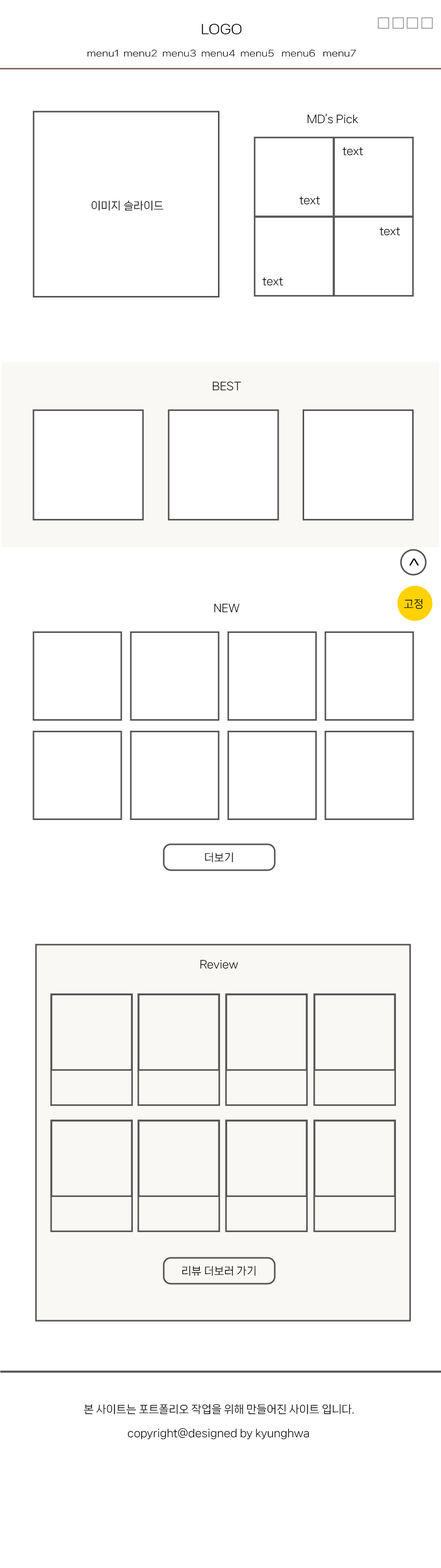
<style>
.page{position:relative;width:441px;height:1568px;background:#ffffff}
.page>*{position:absolute;margin:0}
.t1{font:8.4px "NanumSquareNeoTTF-bRg";color:#000000;scale:1.15 1}
.t2{font:10.6px "NanumSquareNeoTTF-bRg";color:#000000;scale:1.15 1}
.t3{font:12.7px "NanumSquareNeoTTF-bRg";color:#000000;scale:1.15 1}
.t4{font:10.6px "NanumSquareNeoTTF-bRg";color:#000000}
.t5{font:20.1px "NanumSquareNeoTTF-bRg";color:#000000}
</style>
<div class="page">
<p class="t1" style="left:87px;top:24px;width:269px;height:33px;text-align:center"><span class="t2"><br></span><span class="t3">LOGO<br><br></span>menu1  menu2  menu3  menu4  menu5   menu6   menu7</p>
<p class="t4" style="left:307px;top:114px;width:51px;height:10px">MD’s Pick</p>
<p class="t4" style="left:342px;top:147px;width:21px;height:9px">text</p>
<p class="t4" style="left:299px;top:196px;width:21px;height:9px">text</p>
<p class="t4" style="left:91px;top:200px;width:72px;height:11px">이미지 슬라이드</p>
<p class="t4" style="left:379px;top:227px;width:21px;height:9px">text</p>
<p class="t4" style="left:262px;top:277px;width:21px;height:9px">text</p>
<p class="t4" style="left:212px;top:381px;width:29px;height:10px">BEST</p>
<p class="t5" style="left:409px;top:558px;width:10px;height:8px">^</p>
<p class="t4" style="left:214px;top:604px;width:26px;height:9px">NEW</p>
<p class="t4" style="left:404px;top:599px;width:19px;height:10px">고정</p>
<p class="t4" style="left:205px;top:852px;width:28px;height:11px">더보기</p>
<p class="t4" style="left:200px;top:960px;width:38px;height:9px">Review</p>
<p class="t4" style="left:182px;top:1265px;width:73px;height:11px">리뷰 더보러 가기</p>
<p class="t4" style="left:84px;top:1404px;width:270px;height:10px">본 사이트는 포트폴리오 작업을 위해 만들어진 사이트 입니다.</p>
<p class="t4" style="left:128px;top:1428px;width:181px;height:11px">copyright@designed by kyunghwa</p>
</div>
